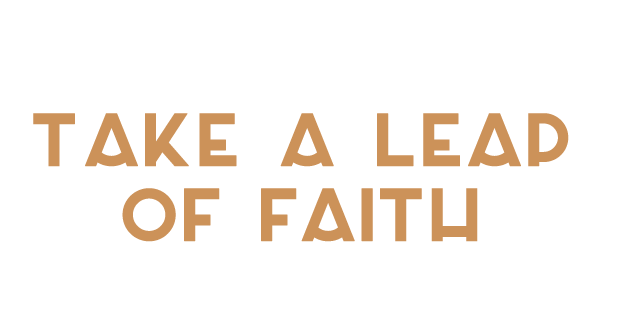
<style>
.page{position:relative;width:640px;height:320px;background:#ffffff}
.page>*{position:absolute;margin:0}
.t1{font:100px/75px "Azedo-Bold";letter-spacing:-0.01em;color:#cc9259;font-weight:bold}
</style>
<div class="page">
<p class="t1" style="left:33px;top:113px;width:536px;height:129px;text-align:center">Take a leap<br>of faith</p>
</div>
